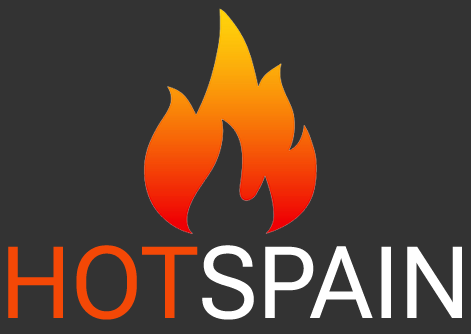
<style>
.page{position:relative;width:471px;height:334px;background:#333333}
.page>*{position:absolute;margin:0}
.t1{font:100px "RobotoFlex-Regular";color:#ffffff}
.t2{font:100px "RobotoFlex-Regular";color:#f44806}
</style>
<div class="page">
<p class="t1" style="left:8px;top:245px;width:454px;height:75px"><span class="t2">HOT</span>SPAIN</p>
</div>
